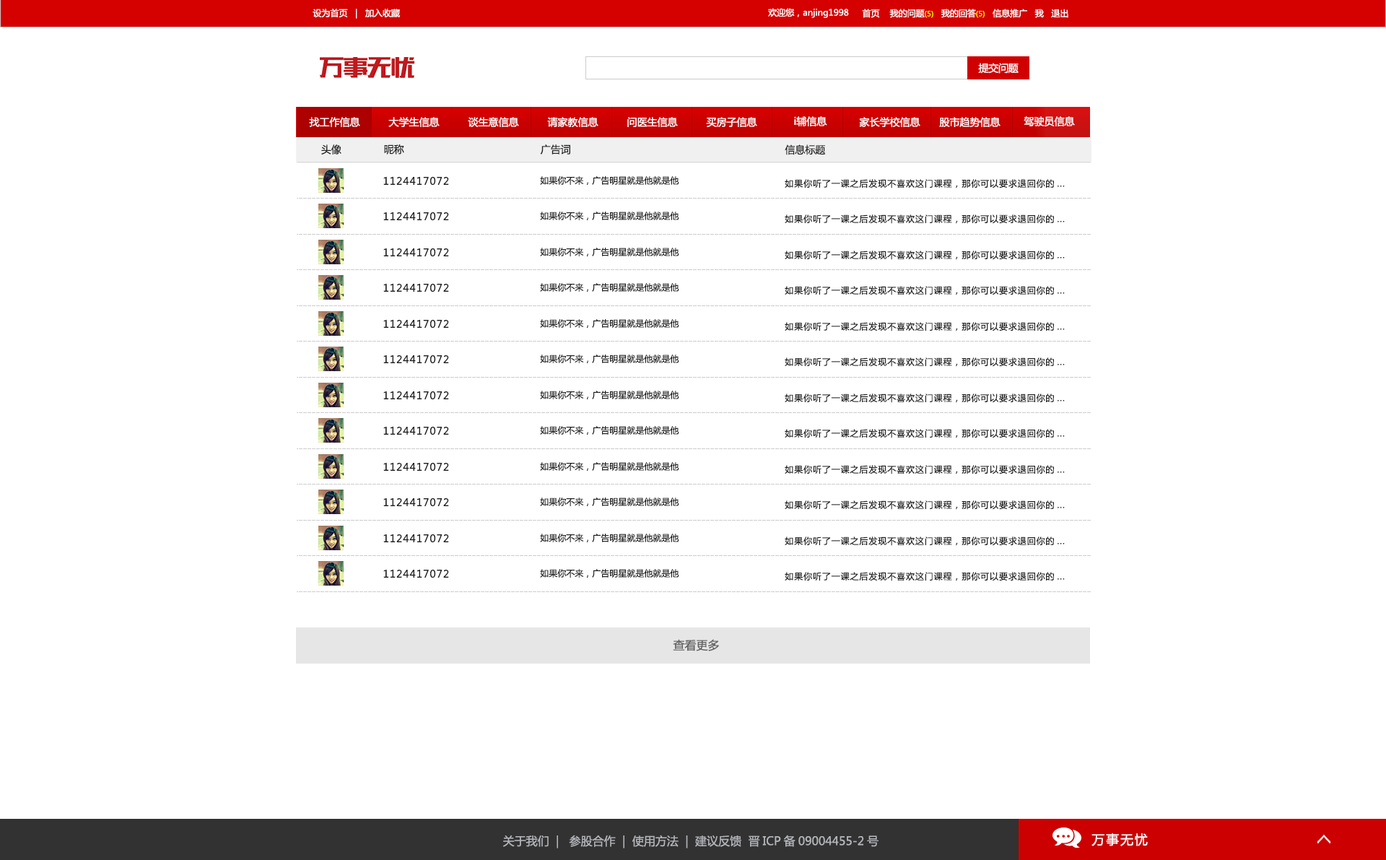
<style>
.page{position:relative;width:1386px;height:860px;background:#ffffff}
.page>*{position:absolute;margin:0}
.t1{font:8.7px "MicrosoftYaHei";color:#ffffff}
.t2{font:7.2px "MicrosoftYaHei";color:#fff600}
.t3{font:10.1px "MicrosoftYaHei";letter-spacing:-0.02em;color:#ffffff}
.t4{font:10.1px "MicrosoftYaHei";color:#ffffff}
.t5{font:10.1px "MicrosoftYaHei";color:#222222}
.t6{font:10.1px "MicrosoftYaHei";letter-spacing:0.075em;color:#1f1f1f}
.t7{font:8.7px "MicrosoftYaHei";color:#1f1f1f}
.t8{font:8.7px "MicrosoftYaHei";letter-spacing:0.075em;color:#1f1f1f}
.t9{font:11.6px "MicrosoftYaHei";color:#5e5e5e}
.t10{font:13px "MicrosoftYaHei";letter-spacing:0.1em;color:#ffffff}
.t11{font:11.6px "MicrosoftYaHei";color:#b3b5ba}
</style>
<div class="page">
<p class="t1" style="left:313px;top:9px;width:87px;height:10px">设为首页   |   加入收藏</p>
<p class="t1" style="left:768px;top:8px;width:81px;height:10px">欢迎您，anjing1998</p>
<p class="t1" style="left:862px;top:9px;width:207px;height:9px">首页    我的问题<span class="t2">(5)</span>   我的回答<span class="t2">(5)</span>   信息推广   我   退出</p>
<p class="t3" style="left:978px;top:63px;width:41px;height:11px">提交问题</p>
<p class="t4" style="left:309px;top:117px;width:51px;height:10px">找工作信息</p>
<p class="t4" style="left:389px;top:117px;width:51px;height:10px">大学生信息</p>
<p class="t4" style="left:468px;top:117px;width:51px;height:10px">谈生意信息</p>
<p class="t4" style="left:547px;top:117px;width:52px;height:10px">请家教信息</p>
<p class="t4" style="left:628px;top:117px;width:50px;height:10px">问医生信息</p>
<p class="t4" style="left:706px;top:117px;width:52px;height:10px">买房子信息</p>
<p class="t4" style="left:794px;top:116px;width:34px;height:10px">i辅信息</p>
<p class="t4" style="left:859px;top:117px;width:62px;height:10px">家长学校信息</p>
<p class="t4" style="left:939px;top:117px;width:62px;height:10px">股市趋势信息</p>
<p class="t4" style="left:1024px;top:116px;width:51px;height:10px">驾驶员信息</p>
<p class="t5" style="left:321px;top:144px;width:21px;height:11px">头像</p>
<p class="t5" style="left:384px;top:144px;width:20px;height:11px">昵称</p>
<p class="t5" style="left:540px;top:144px;width:30px;height:11px">广告词</p>
<p class="t5" style="left:785px;top:144px;width:41px;height:11px">信息标题</p>
<p class="t6" style="left:383px;top:176px;width:66px;height:9px">1124417072</p>
<p class="t7" style="left:540px;top:176px;width:140px;height:9px">如果你不来，广告明星就是他就是他</p>
<p class="t8" style="left:785px;top:179px;width:280px;height:9px">如果你听了一课之后发现不喜欢这门课程，那你可以要求退回你的...</p>
<p class="t6" style="left:383px;top:212px;width:66px;height:8px">1124417072</p>
<p class="t7" style="left:540px;top:212px;width:140px;height:8px">如果你不来，广告明星就是他就是他</p>
<p class="t8" style="left:785px;top:214px;width:280px;height:10px">如果你听了一课之后发现不喜欢这门课程，那你可以要求退回你的...</p>
<p class="t6" style="left:383px;top:248px;width:66px;height:8px">1124417072</p>
<p class="t7" style="left:540px;top:248px;width:140px;height:8px">如果你不来，广告明星就是他就是他</p>
<p class="t8" style="left:785px;top:251px;width:280px;height:9px">如果你听了一课之后发现不喜欢这门课程，那你可以要求退回你的...</p>
<p class="t6" style="left:383px;top:283px;width:66px;height:9px">1124417072</p>
<p class="t7" style="left:540px;top:283px;width:140px;height:9px">如果你不来，广告明星就是他就是他</p>
<p class="t8" style="left:785px;top:286px;width:280px;height:9px">如果你听了一课之后发现不喜欢这门课程，那你可以要求退回你的...</p>
<p class="t6" style="left:383px;top:319px;width:66px;height:9px">1124417072</p>
<p class="t7" style="left:540px;top:319px;width:140px;height:9px">如果你不来，广告明星就是他就是他</p>
<p class="t8" style="left:785px;top:322px;width:280px;height:9px">如果你听了一课之后发现不喜欢这门课程，那你可以要求退回你的...</p>
<p class="t6" style="left:383px;top:355px;width:66px;height:8px">1124417072</p>
<p class="t7" style="left:540px;top:355px;width:140px;height:8px">如果你不来，广告明星就是他就是他</p>
<p class="t8" style="left:785px;top:357px;width:280px;height:10px">如果你听了一课之后发现不喜欢这门课程，那你可以要求退回你的...</p>
<p class="t6" style="left:383px;top:391px;width:66px;height:8px">1124417072</p>
<p class="t7" style="left:540px;top:391px;width:140px;height:8px">如果你不来，广告明星就是他就是他</p>
<p class="t8" style="left:785px;top:394px;width:280px;height:9px">如果你听了一课之后发现不喜欢这门课程，那你可以要求退回你的...</p>
<p class="t6" style="left:383px;top:426px;width:66px;height:9px">1124417072</p>
<p class="t7" style="left:540px;top:426px;width:140px;height:9px">如果你不来，广告明星就是他就是他</p>
<p class="t8" style="left:785px;top:429px;width:280px;height:9px">如果你听了一课之后发现不喜欢这门课程，那你可以要求退回你的...</p>
<p class="t6" style="left:383px;top:462px;width:66px;height:9px">1124417072</p>
<p class="t7" style="left:540px;top:462px;width:140px;height:9px">如果你不来，广告明星就是他就是他</p>
<p class="t8" style="left:785px;top:465px;width:280px;height:9px">如果你听了一课之后发现不喜欢这门课程，那你可以要求退回你的...</p>
<p class="t6" style="left:383px;top:498px;width:66px;height:8px">1124417072</p>
<p class="t7" style="left:540px;top:498px;width:140px;height:8px">如果你不来，广告明星就是他就是他</p>
<p class="t8" style="left:785px;top:500px;width:280px;height:10px">如果你听了一课之后发现不喜欢这门课程，那你可以要求退回你的...</p>
<p class="t6" style="left:383px;top:534px;width:66px;height:8px">1124417072</p>
<p class="t7" style="left:540px;top:534px;width:140px;height:8px">如果你不来，广告明星就是他就是他</p>
<p class="t8" style="left:785px;top:537px;width:280px;height:9px">如果你听了一课之后发现不喜欢这门课程，那你可以要求退回你的...</p>
<p class="t6" style="left:383px;top:569px;width:66px;height:9px">1124417072</p>
<p class="t7" style="left:540px;top:569px;width:140px;height:9px">如果你不来，广告明星就是他就是他</p>
<p class="t8" style="left:785px;top:572px;width:280px;height:9px">如果你听了一课之后发现不喜欢这门课程，那你可以要求退回你的...</p>
<p class="t9" style="left:673px;top:639px;width:46px;height:12px">查看更多</p>
<p class="t10" style="left:1092px;top:833px;width:56px;height:13px">万事无忧</p>
<p class="t11" style="left:503px;top:835px;width:376px;height:13px">关于我们  |   参股合作  |  使用方法  |  建议反馈  晋ICP备09004455-2号</p>
</div>
